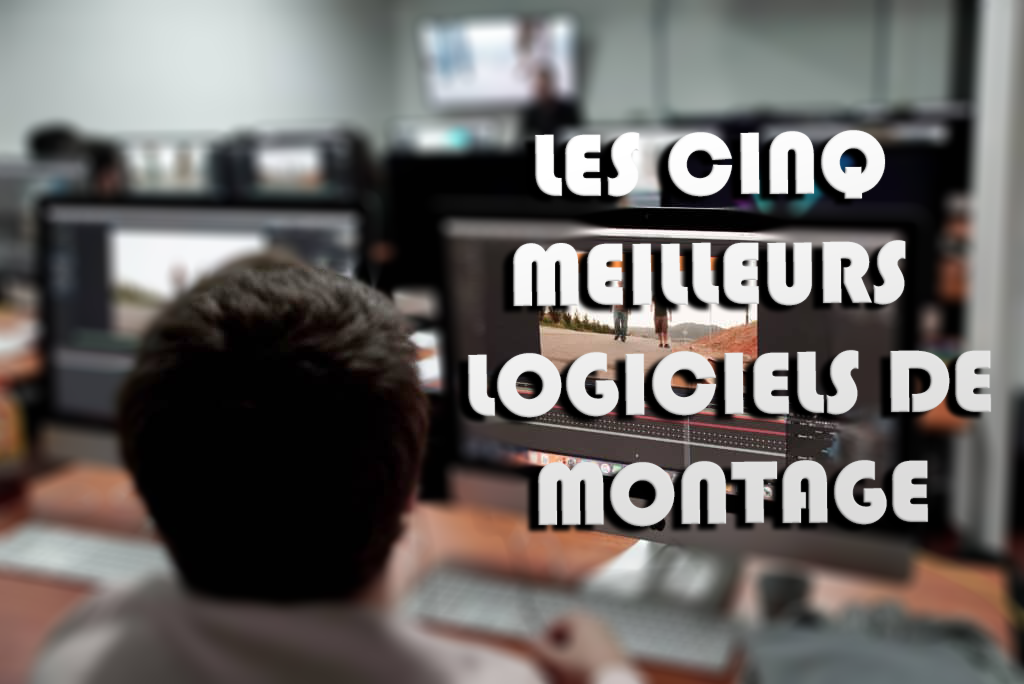
<style>
.page{position:relative;width:1024px;height:684px}
.page>*{position:absolute;margin:0}
.t1{font:91.5px "Bauhaus93";color:#ebebea;text-transform:uppercase}
</style>
<div class="page">
<p class="t1" style="left:468px;top:130px;width:523px;height:397px;rotate:-1deg">LES CINQ<br>  meilleurs<br>logiciels de<br>   Montage</p>
</div>
